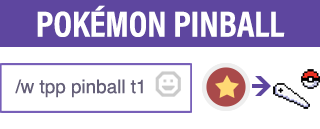
<style>
.page{position:relative;width:320px;height:129px;background:#ffffff}
.page>*{position:absolute;margin:0}
.t1{font:36.3px "AcuminProCond-Bold";color:#ffffff;text-transform:uppercase}
.t2{font:18.9px "Helvetica";color:#645f78}
</style>
<div class="page">
<p class="t1" style="left:37px;top:5px;width:248px;height:32px">PokéMon Pinball</p>
<p class="t2" style="left:15px;top:79px;width:128px;height:19px">/w tpp pinball t1</p>
</div>
